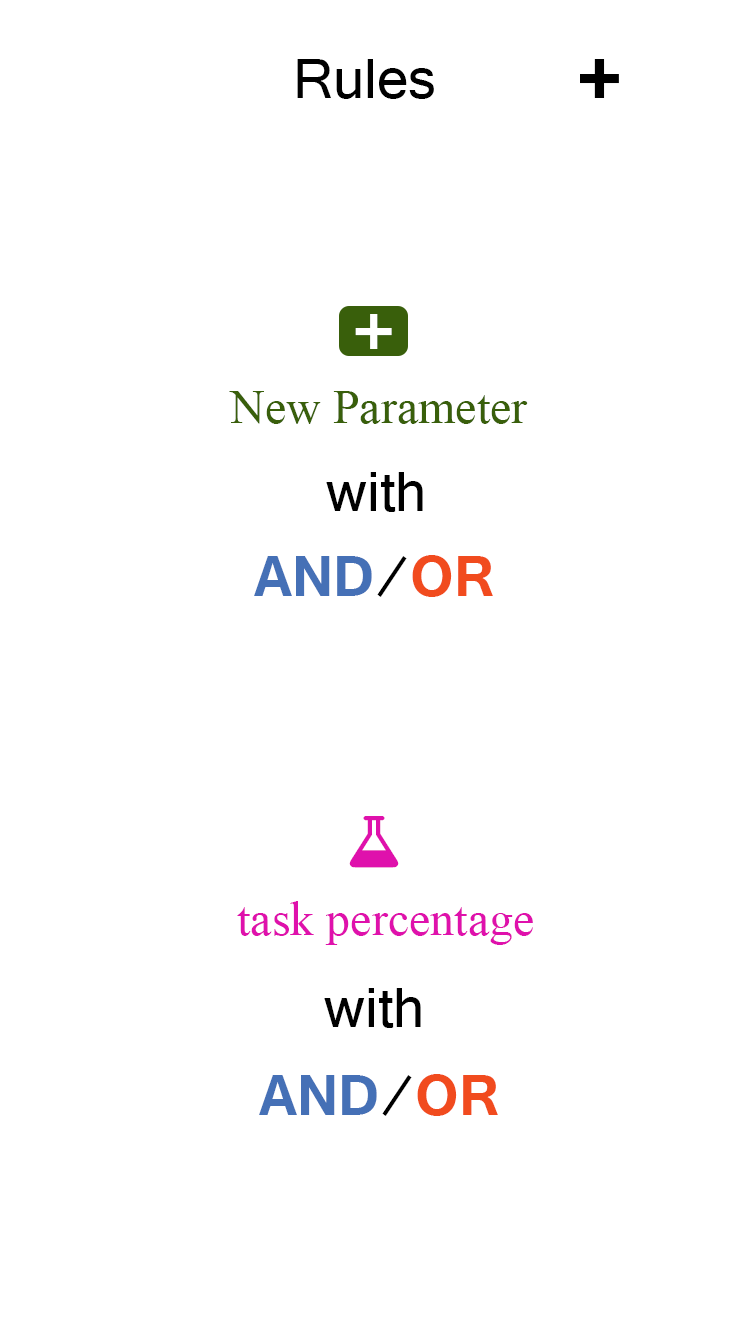
<style>
.page{position:relative;width:750px;height:1334px;background:#ffffff}
.page>*{position:absolute;margin:0}
.t1{font:72px "Tunga";color:#000000}
.t2{font:103.1px "Tunga-Bold";color:#000000}
.t3{font:112.8px "Tunga";color:#ffffff}
.t4{font:48px "TimesNewRomanPSMT";color:#395f0b}
.t5{font:72px "Tunga-Bold";color:#4570b6}
.t6{font:72px "Tunga-Bold";color:#f14b1e}
.t7{font:48px "TimesNewRomanPSMT";color:#df11ac}
</style>
<div class="page">
<p class="t1" style="left:297px;top:59px;width:137px;height:40px">Rules</p>
<p class="t2" style="left:580px;top:59px;width:39px;height:39px">+</p>
<p class="t3" style="left:355px;top:314px;width:37px;height:35px">+</p>
<p class="t4" style="left:229px;top:391px;width:299px;height:33px">New Parameter</p>
<p class="t1" style="left:326px;top:472px;width:97px;height:40px">with</p>
<p class="t5" style="left:254px;top:555px;width:239px;height:42px">AND<span class="t1">/</span><span class="t6">OR</span></p>
<p class="t7" style="left:237px;top:901px;width:296px;height:44px">task percentage</p>
<p class="t1" style="left:324px;top:988px;width:97px;height:40px">with</p>
<p class="t5" style="left:259px;top:1074px;width:239px;height:42px">AND<span class="t1">/</span><span class="t6">OR</span></p>
</div>
